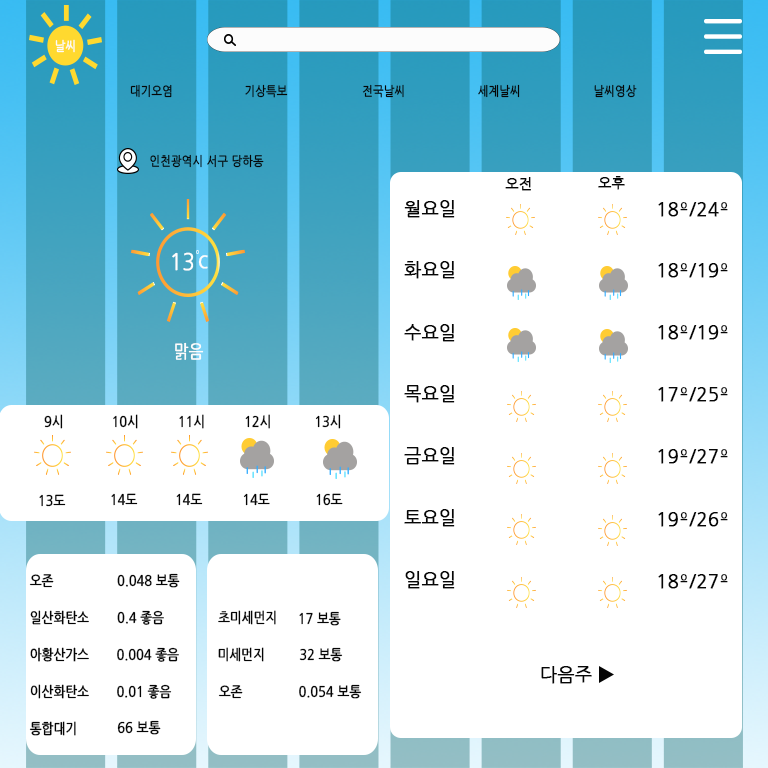
<style>
.page{position:relative;width:768px;height:768px;background:#ffffff}
.page>*{position:absolute;margin:0}
.t1{font:12.8px "NanumGothic";color:#fcfcfc;font-weight:bold;scale:0.87 1}
.t2{font:12.8px "NanumGothic";color:#060606;font-weight:bold;scale:0.87 1}
.t3{font:14px "NanumGothic";color:#060606;font-weight:bold}
.t4{font:18px "NanumGothic";color:#060606;font-weight:bold}
.t5{font:23.1px "NanumGothic";color:#fefefe;font-weight:bold;scale:0.87 1}
.t6{font:23.1px "NanumGothic";color:#fcfcfc;font-weight:bold;scale:0.87 1}
.t7{font:18px "NanumGothic";color:#fcfcfc;font-weight:bold;scale:0.87 1}
.t8{font:14.1px "NanumGothic";color:#050505;font-weight:bold;scale:0.87 1}
</style>
<div class="page">
<p class="t1" style="left:55px;top:39px;width:20px;height:14px">날씨</p>
<p class="t2" style="left:130px;top:84px;width:42px;height:14px">대기오염</p>
<p class="t2" style="left:245px;top:84px;width:43px;height:14px">기상특보</p>
<p class="t2" style="left:362px;top:84px;width:42px;height:14px">전국날씨</p>
<p class="t2" style="left:478px;top:84px;width:42px;height:14px">세계날씨</p>
<p class="t2" style="left:594px;top:84px;width:43px;height:14px">날씨영상</p>
<p class="t2" style="left:150px;top:154px;width:114px;height:14px">인천광역시 서구 당하동</p>
<p class="t3" style="left:505px;top:177px;width:26px;height:14px">오전</p>
<p class="t3" style="left:598px;top:176px;width:27px;height:14px">오후</p>
<p class="t4" style="left:404px;top:200px;width:51px;height:18px">월요일</p>
<p class="t4" style="left:658px;top:202px;width:70px;height:15px">18º/24º</p>
<p class="t5" style="left:172px;top:252px;width:22px;height:19px">13</p>
<p class="t6" style="left:198px;top:255px;width:10px;height:14px">c</p>
<p class="t4" style="left:404px;top:261px;width:51px;height:18px">화요일</p>
<p class="t4" style="left:658px;top:263px;width:70px;height:15px">18º/19º</p>
<p class="t4" style="left:404px;top:324px;width:51px;height:18px">수요일</p>
<p class="t4" style="left:658px;top:325px;width:70px;height:15px">18º/19º</p>
<p class="t7" style="left:175px;top:342px;width:29px;height:18px">맑음</p>
<p class="t4" style="left:404px;top:385px;width:51px;height:18px">목요일</p>
<p class="t4" style="left:658px;top:387px;width:70px;height:15px">17º/25º</p>
<p class="t8" style="left:44px;top:414px;width:19px;height:15px">9시</p>
<p class="t8" style="left:113px;top:414px;width:25px;height:15px">10시</p>
<p class="t8" style="left:179px;top:414px;width:25px;height:15px">11시</p>
<p class="t8" style="left:245px;top:414px;width:25px;height:15px">12시</p>
<p class="t8" style="left:315px;top:414px;width:26px;height:15px">13시</p>
<p class="t4" style="left:404px;top:447px;width:51px;height:18px">금요일</p>
<p class="t4" style="left:658px;top:449px;width:70px;height:15px">19º/27º</p>
<p class="t8" style="left:39px;top:494px;width:27px;height:13px">13도</p>
<p class="t8" style="left:111px;top:493px;width:27px;height:13px">14도</p>
<p class="t8" style="left:176px;top:493px;width:27px;height:13px">14도</p>
<p class="t8" style="left:243px;top:493px;width:27px;height:13px">14도</p>
<p class="t8" style="left:316px;top:493px;width:27px;height:13px">16도</p>
<p class="t4" style="left:404px;top:509px;width:51px;height:18px">토요일</p>
<p class="t4" style="left:658px;top:512px;width:70px;height:15px">19º/26º</p>
<p class="t8" style="left:29px;top:574px;width:25px;height:14px">오존</p>
<p class="t8" style="left:117px;top:573px;width:63px;height:15px">0.048 보통</p>
<p class="t4" style="left:405px;top:571px;width:50px;height:18px">일요일</p>
<p class="t4" style="left:658px;top:574px;width:70px;height:15px">18º/27º</p>
<p class="t8" style="left:30px;top:610px;width:59px;height:15px">일산화탄소</p>
<p class="t8" style="left:117px;top:610px;width:47px;height:15px">0.4 좋음</p>
<p class="t8" style="left:218px;top:610px;width:58px;height:15px">초미세먼지</p>
<p class="t8" style="left:299px;top:611px;width:42px;height:15px">17 보통</p>
<p class="t8" style="left:30px;top:647px;width:59px;height:15px">아황산가스</p>
<p class="t8" style="left:117px;top:647px;width:62px;height:15px">0.004 좋음</p>
<p class="t8" style="left:218px;top:647px;width:46px;height:15px">미세먼지</p>
<p class="t8" style="left:299px;top:647px;width:44px;height:15px">32 보통</p>
<p class="t4" style="left:541px;top:666px;width:51px;height:18px">다음주</p>
<p class="t8" style="left:30px;top:684px;width:59px;height:15px">이산화탄소</p>
<p class="t8" style="left:117px;top:684px;width:55px;height:15px">0.01 좋음</p>
<p class="t8" style="left:218px;top:685px;width:25px;height:14px">오존</p>
<p class="t8" style="left:299px;top:684px;width:63px;height:15px">0.054 보통</p>
<p class="t8" style="left:29px;top:721px;width:47px;height:15px">통합대기</p>
<p class="t8" style="left:117px;top:720px;width:44px;height:15px">66 보통</p>
</div>
